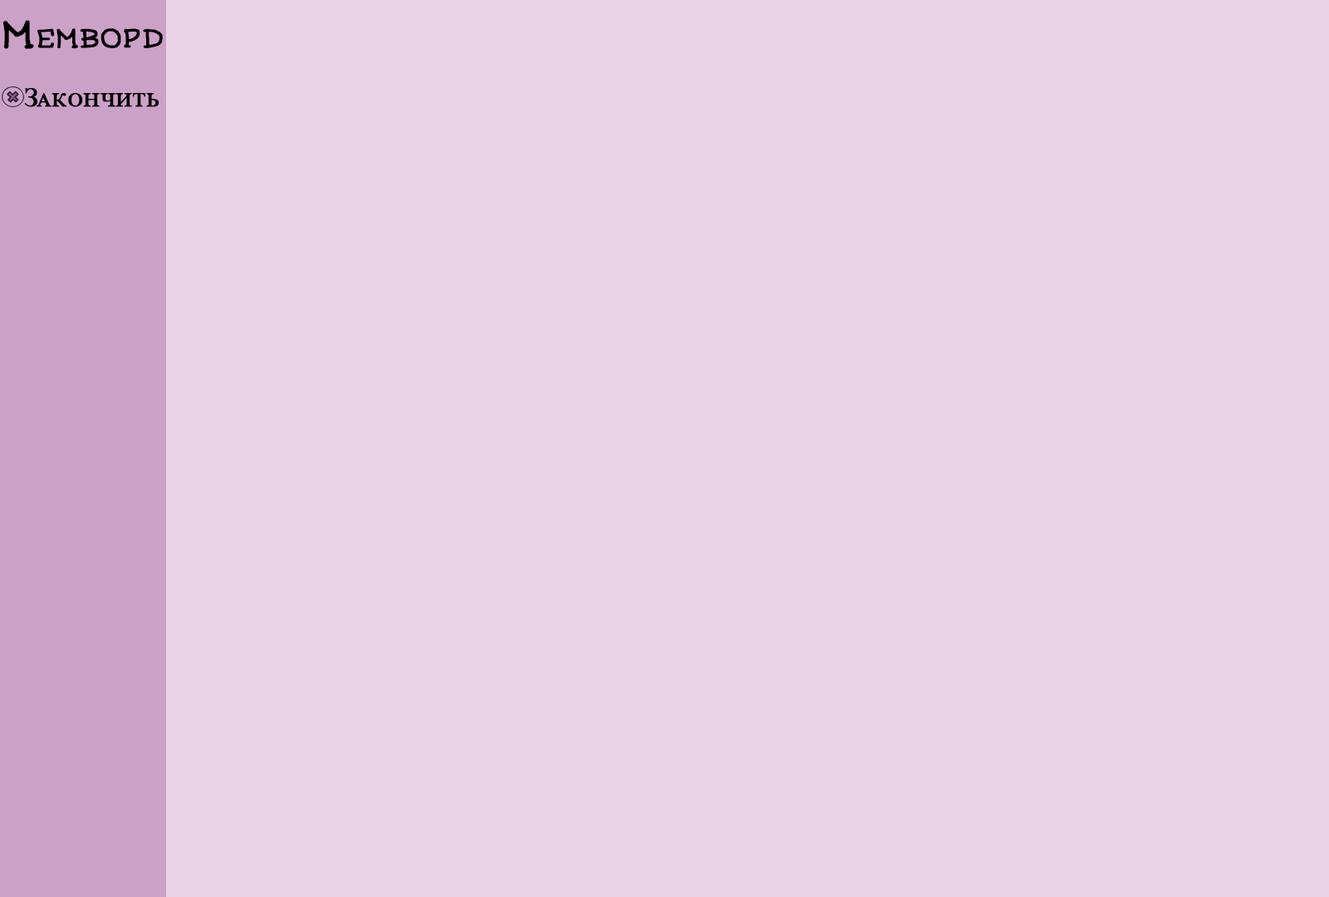
<style>
.page{position:relative;width:1329px;height:897px;background:#ead3e7}
.page>*{position:absolute;margin:0}
.t1{font:38.1px "Mandy'sSketch";color:#000000;font-variant:small-caps;font-weight:bold}
.t2{font:27.7px "TimesNewRomanPSMT";color:#000000;font-variant:small-caps;font-weight:bold}
</style>
<div class="page">
<p class="t1" style="left:3px;top:20px;width:160px;height:29px">Мемворд</p>
<p class="t2" style="left:24px;top:88px;width:135px;height:19px">Закончить</p>
</div>
